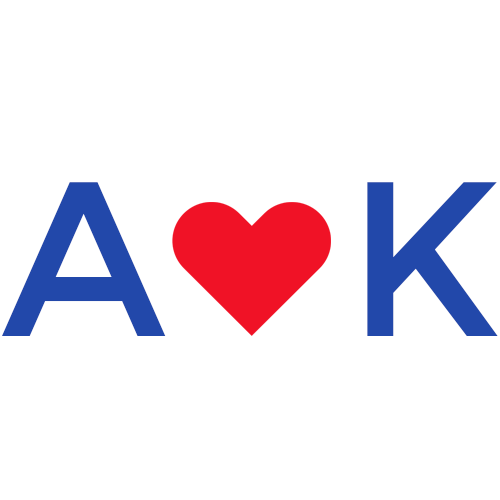
<style>
.page{position:relative;width:500px;height:500px;background:#ffffff}
.page>*{position:absolute;margin:0}
.t1{font:220px "Montserrat-Regular";color:#2248aa}
</style>
<div class="page">
<p class="t1" style="left:2px;top:182px;width:496px;height:154px">A   K</p>
</div>
